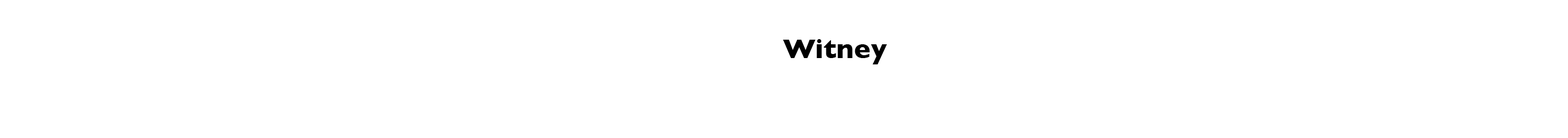
<style>
.page{position:relative;width:1568px;height:138px;background:#ffffff}
.page>*{position:absolute;margin:0}
.t1{font:27.5px "GillSans-Bold";color:#000000}
</style>
<div class="page">
<p class="t1" style="left:783px;top:39px;width:104px;height:25px">Witney</p>
</div>
